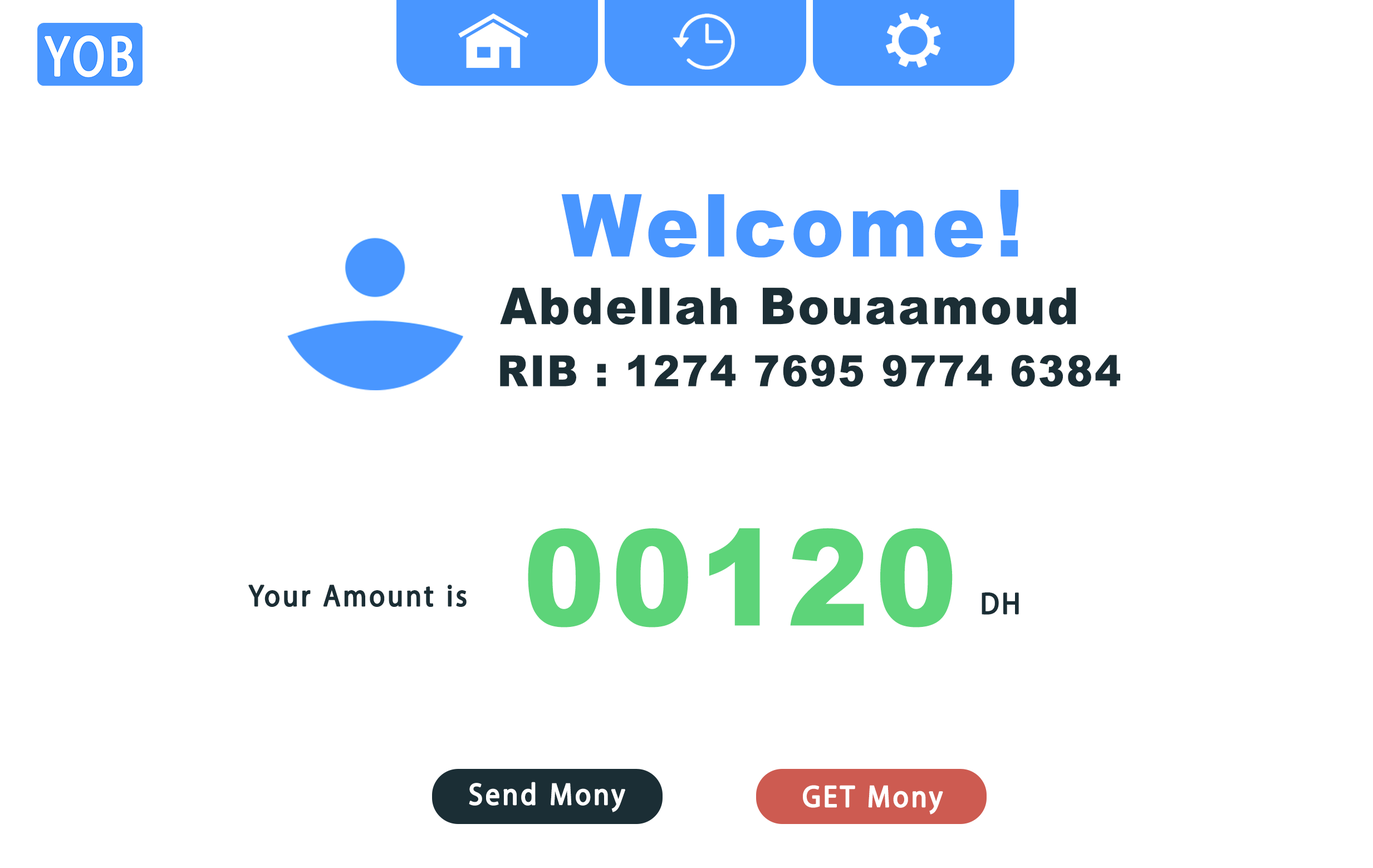
<style>
.page{position:relative;width:1373px;height:868px;background:#ffffff}
.page>*{position:absolute;margin:0}
.t1{font:86.9px "Arial-Black";letter-spacing:0.05em;color:#4996ff;scale:0.92 1}
.t2{font:86.9px "Arial-Black";letter-spacing:0.05em;color:#4996ff;text-transform:uppercase;scale:0.92 1}
.t3{font:93px "Arial-Black";letter-spacing:0.05em;color:#4996ff;scale:0.92 1}
.t4{font:50.7px "Arial-Black";letter-spacing:0.05em;color:#1b2e35;scale:0.92 1}
.t5{font:42.9px "Arial-Black";letter-spacing:0.05em;color:#1b2e35;scale:0.92 1}
.t6{font:133.5px "Arial-Black";letter-spacing:0.05em;color:#5dd479;scale:0.92 1}
.t7{font:42.9px "MyriadArabic-Regular";letter-spacing:0.05em;color:#1b2e35;font-weight:bold;scale:0.92 1}
.t8{font:42.9px "MyriadArabic-Regular";letter-spacing:0.05em;color:#ffffff;font-weight:bold;scale:0.92 1}
</style>
<div class="page">
<p class="t1" style="left:561px;top:194px;width:423px;height:64px"><span class="t2">w</span>elcome</p>
<p class="t3" style="left:1000px;top:190px;width:19px;height:67px">!</p>
<p class="t4" style="left:500px;top:287px;width:577px;height:38px">Abdellah Bouaamoud</p>
<p class="t5" style="left:500px;top:355px;width:621px;height:32px">RIB : 1274 7695 9774 6384</p>
<p class="t6" style="left:528px;top:528px;width:425px;height:100px">00120</p>
<p class="t7" style="left:248px;top:585px;width:219px;height:22px">Your Amount is</p>
<p class="t7" style="left:982px;top:593px;width:37px;height:22px">DH</p>
<p class="t8" style="left:469px;top:782px;width:156px;height:31px">Send Mony</p>
<p class="t8" style="left:803px;top:785px;width:140px;height:30px">GET Mony</p>
</div>
